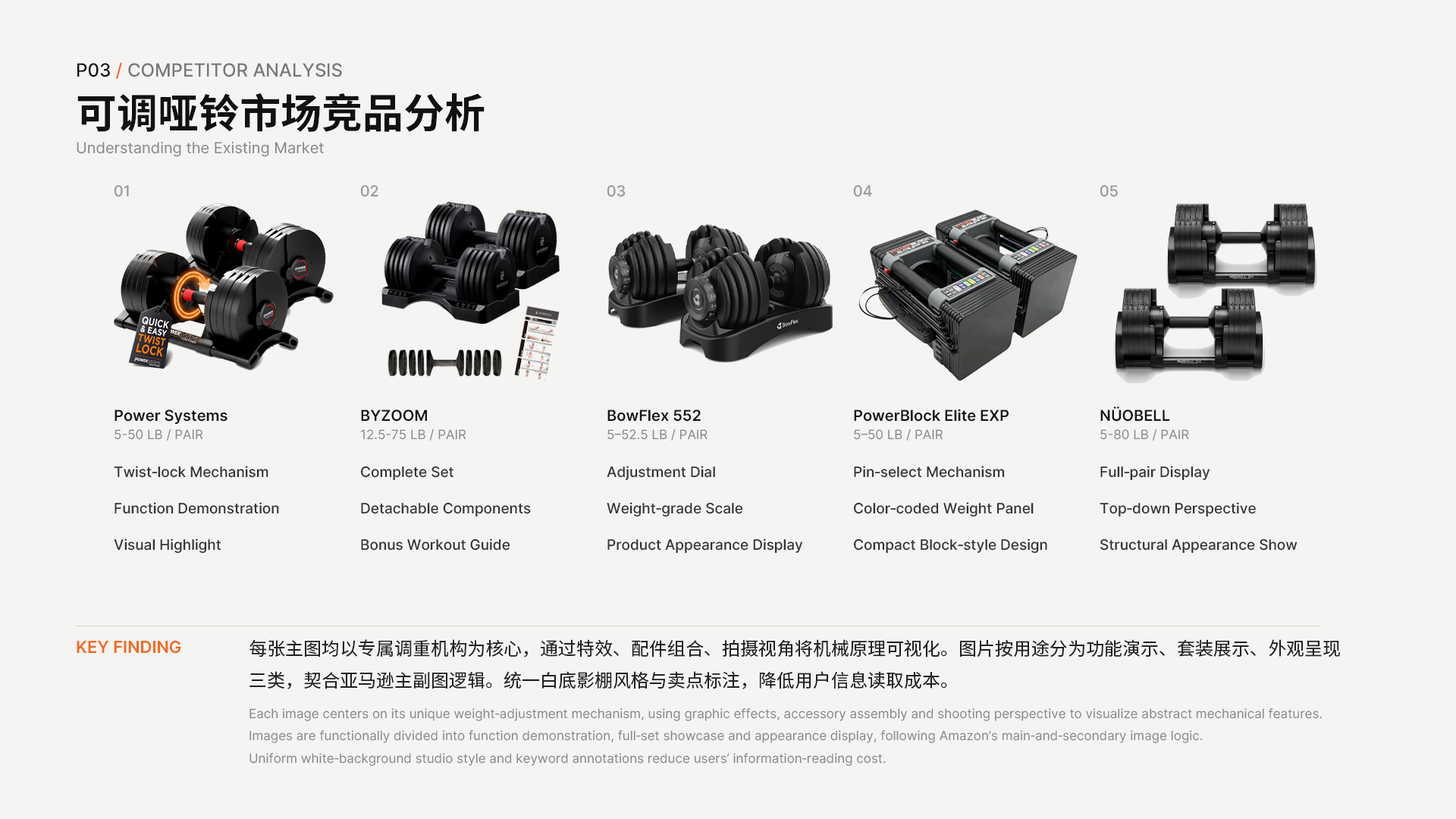
<style>
.page{position:relative;width:1456px;height:819px;background:#f4f4f2}
.page>*{position:absolute;margin:0}
.t1{font:18.2px "Inter-Medium";color:#777777}
.t2{font:18.2px "Inter-Medium";color:#111111}
.t3{font:18.2px "Inter-Medium";color:#f26a21}
.t4{font:40.9px "SourceHanSansSC-Bold";color:#111111}
.t5{font:15.2px "Inter-Regular";color:#888888}
.t6{font:15.2px "Inter-Medium";color:#999999}
.t7{font:15.2px "Inter-SemiBold";color:#171717}
.t8{font:12.9px "Inter-Regular";color:#888888}
.t9{font:14.4px/36.4px "Inter-Medium";color:#333333}
.t10{font:16.7px "Inter-SemiBold";color:#f26a21}
.t11{font:18.2px "SourceHanSansSC-Regular";color:#222222}
</style>
<div class="page">
<p class="t1" style="left:77px;top:62px;width:265px;height:17px"><span class="t2">P03 </span><span class="t3">/ </span>COMPETITOR ANALYSIS</p>
<p class="t4" style="left:77px;top:93px;width:408px;height:39px">可调哑铃市场竞品分析</p>
<p class="t5" style="left:77px;top:141px;width:247px;height:16px">Understanding the Existing Market</p>
<p class="t6" style="left:114px;top:185px;width:15px;height:12px">01</p>
<p class="t6" style="left:360px;top:185px;width:18px;height:12px">02</p>
<p class="t6" style="left:607px;top:185px;width:19px;height:12px">03</p>
<p class="t6" style="left:853px;top:185px;width:19px;height:12px">04</p>
<p class="t6" style="left:1100px;top:185px;width:18px;height:12px">05</p>
<p class="t7" style="left:115px;top:409px;width:112px;height:15px">Power Systems</p>
<p class="t7" style="left:361px;top:409px;width:66px;height:13px">BYZOOM</p>
<p class="t7" style="left:607px;top:409px;width:94px;height:13px">BowFlex 552</p>
<p class="t7" style="left:854px;top:409px;width:155px;height:13px">PowerBlock Elite EXP</p>
<p class="t7" style="left:1100px;top:406px;width:70px;height:16px">NÜOBELL</p>
<p class="t8" style="left:115px;top:428px;width:88px;height:13px">5-50 LB / PAIR</p>
<p class="t8" style="left:360px;top:428px;width:106px;height:13px">12.5-75 LB / PAIR</p>
<p class="t8" style="left:607px;top:428px;width:101px;height:13px">5–52.5 LB / PAIR</p>
<p class="t8" style="left:854px;top:429px;width:89px;height:12px">5–50 LB / PAIR</p>
<p class="t8" style="left:1100px;top:428px;width:89px;height:13px">5-80 LB / PAIR</p>
<p class="t9" style="left:114px;top:466px;width:165px;height:88px">Twist‑lock Mechanism<br>Function Demonstration<br>Visual Highlight</p>
<p class="t9" style="left:360px;top:466px;width:171px;height:85px">Complete Set<br>Detachable Components<br>Bonus Workout Guide</p>
<p class="t9" style="left:607px;top:466px;width:196px;height:88px">Adjustment Dial<br>Weight‑grade Scale<br>Product Appearance Display</p>
<p class="t9" style="left:853px;top:466px;width:194px;height:88px">Pin‑select Mechanism<br>Color‑coded Weight Panel<br>Compact Block‑style Design</p>
<p class="t9" style="left:1100px;top:466px;width:197px;height:88px">Full‑pair Display<br>Top‑down Perspective<br>Structural Appearance Show</p>
<p class="t10" style="left:77px;top:640px;width:104px;height:14px">KEY FINDING</p>
<p class="t11" style="left:249px;top:639px;width:1091px;height:50px">每张主图均以专属调重机构为核心，通过特效、配件组合、拍摄视角将机械原理可视化。图片按用途分为功能演示、套装展示、外观呈现三类，契合亚马逊主副图逻辑。统一白底影棚风格与卖点标注，降低用户信息读取成本。</p>
<p class="t8" style="left:249px;top:708px;width:1073px;height:58px">Each image centers on its unique weight‑adjustment mechanism, using graphic effects, accessory assembly and shooting perspective to visualize abstract mechanical features.<br>Images are functionally divided into function demonstration, full‑set showcase and appearance display, following Amazon’s main‑and‑secondary image logic.<br>Uniform white‑background studio style and keyword annotations reduce users’ information‑reading cost.</p>
</div>
